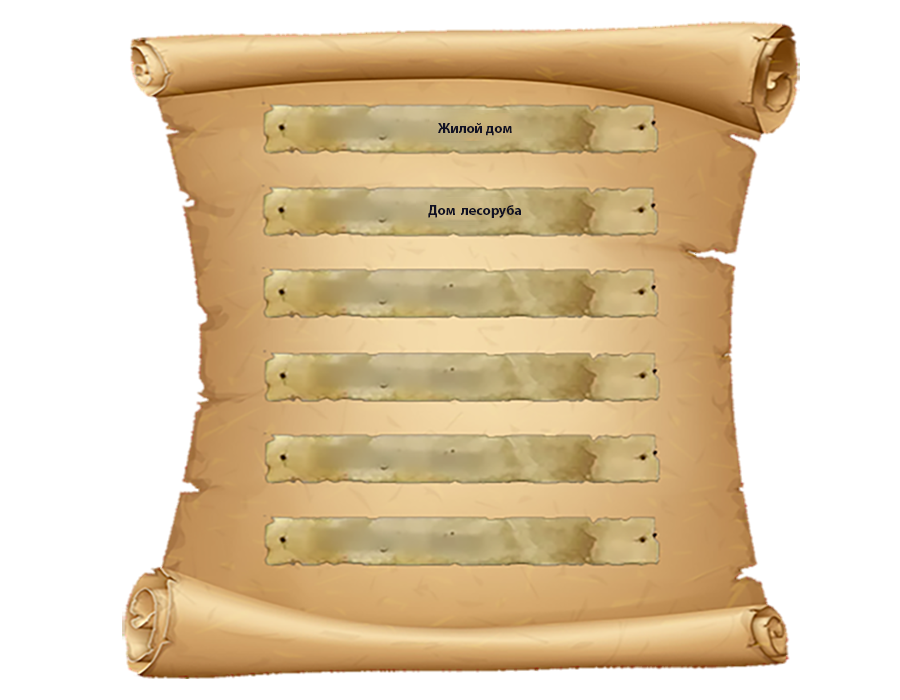
<style>
.page{position:relative;width:900px;height:700px;background:#ffffff}
.page>*{position:absolute;margin:0}
.t1{font:14px "MyriadPro-Bold";color:#111224}
</style>
<div class="page">
<p class="t1" style="left:438px;top:123px;width:74px;height:13px">Жилой дом</p>
<p class="t1" style="left:428px;top:205px;width:93px;height:13px">Дом  лесоруба</p>
</div>
